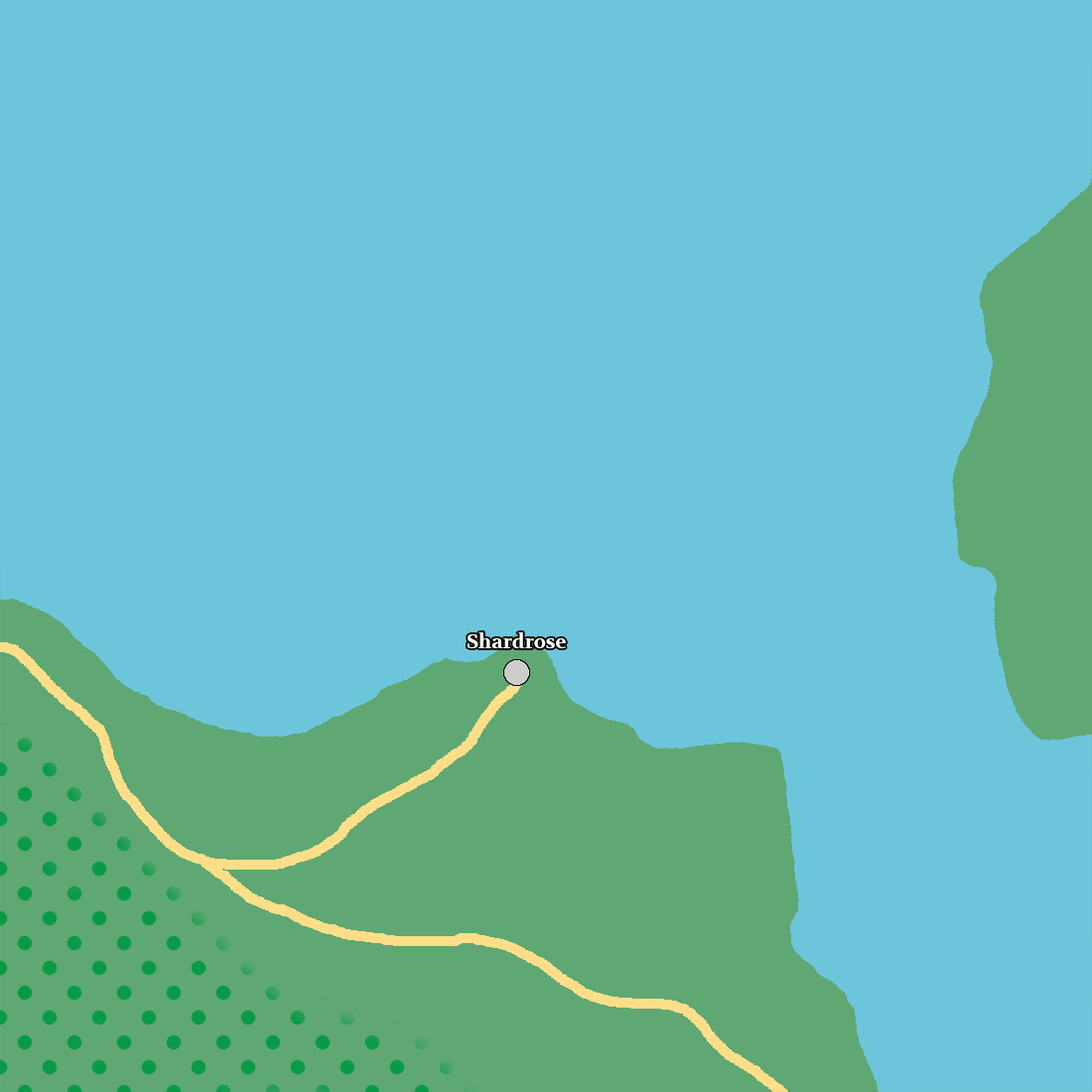
<style>
.page{position:relative;width:1092px;height:1092px;background:#6dc5dc}
.page>*{position:absolute;margin:0}
.t1{font:19.9px "Volkhov-Bold";color:#ffffff}
</style>
<div class="page">
<p class="t1" style="left:468px;top:632px;width:98px;height:16px">Shardrose</p>
</div>
